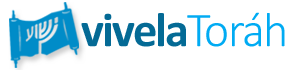
<style>
.page{position:relative;width:300px;height:70px;background:#ffffff}
.page>*{position:absolute;margin:0}
.t1{font:48.6px "Calibri-Bold";letter-spacing:-0.04em;color:#046a96}
.t2{font:48.6px "Calibri-Light";letter-spacing:-0.04em;color:#00abf4}
</style>
<div class="page">
<p class="t1" style="left:81px;top:12px;width:204px;height:35px">vivela<span class="t2">Toráh</span></p>
</div>
